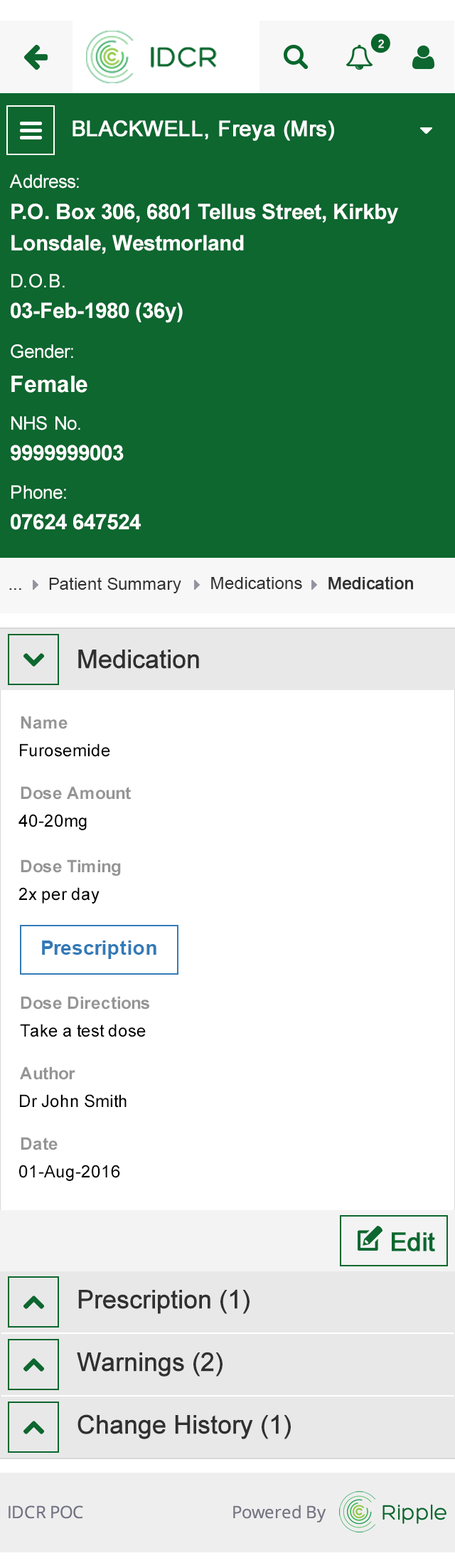
<style>
.page{position:relative;width:455px;height:1568px;background:#ffffff}
.page>*{position:absolute;margin:0}
.t1{font:21.3px/30.9px "Arial-BoldMT";color:#ffffff}
.t2{font:18.5px/30.9px "ArialMT";color:#ffffff}
.t3{font:22.8px/33.8px "Arial-BoldMT";color:#ffffff}
.t4{font:17.1px "ArialMT";color:#313131}
.t5{font:17.1px "ArialMT";color:#313131;font-weight:bold}
.t6{font:25.6px "ArialMT";color:#303030;font-weight:bold}
.t7{font:17.1px "Arial-BoldMT";color:#959595}
.t8{font:17.1px "ArialMT";color:#000000}
.t9{font:19.9px "Arial-BoldMT";color:#337ab7}
</style>
<div class="page">
<p class="t1" style="left:9px;top:174px;width:389px;height:80px"><span class="t2">Address: <br></span>P.O. Box 306, 6801 Tellus Street, Kirkby Lonsdale, Westmorland</p>
<p class="t1" style="left:11px;top:274px;width:172px;height:49px"><span class="t2">D.O.B. <br></span>03-Feb-1980 (36y)</p>
<p class="t2" style="left:11px;top:344px;width:77px;height:49px">Gender: <br><span class="t3">Female</span></p>
<p class="t1" style="left:11px;top:416px;width:113px;height:45px"><span class="t2">NHS No. <br></span>9999999003</p>
<p class="t1" style="left:11px;top:485px;width:130px;height:45px"><span class="t2">Phone: <br></span>07624 647524</p>
<p class="t4" style="left:49px;top:577px;width:132px;height:16px">Patient Summary</p>
<p class="t4" style="left:211px;top:576px;width:91px;height:13px">Medications</p>
<p class="t5" style="left:329px;top:576px;width:84px;height:14px">Medication</p>
<p class="t4" style="left:9px;top:588px;width:12px;height:2px">...</p>
<p class="t6" style="left:78px;top:650px;width:121px;height:19px">Medication</p>
<p class="t7" style="left:21px;top:716px;width:47px;height:13px">Name</p>
<p class="t8" style="left:20px;top:743px;width:90px;height:14px">Furosemide</p>
<p class="t7" style="left:21px;top:786px;width:110px;height:14px">Dose Amount</p>
<p class="t8" style="left:18px;top:814px;width:69px;height:16px">40-20mg</p>
<p class="t7" style="left:21px;top:859px;width:100px;height:17px">Dose Timing</p>
<p class="t8" style="left:18px;top:887px;width:82px;height:17px">2x per day</p>
<p class="t9" style="left:42px;top:941px;width:115px;height:18px">Prescription</p>
<p class="t7" style="left:21px;top:996px;width:128px;height:14px">Dose Directions</p>
<p class="t8" style="left:20px;top:1024px;width:126px;height:13px">Take a test dose</p>
<p class="t7" style="left:20px;top:1066px;width:55px;height:14px">Author</p>
<p class="t8" style="left:20px;top:1094px;width:107px;height:14px">Dr John Smith</p>
<p class="t7" style="left:21px;top:1137px;width:37px;height:13px">Date</p>
<p class="t8" style="left:19px;top:1165px;width:101px;height:16px">01-Aug-2016</p>
<p class="t6" style="left:78px;top:1289px;width:172px;height:25px">Prescription (1)</p>
<p class="t6" style="left:77px;top:1352px;width:146px;height:25px">Warnings (2)</p>
<p class="t6" style="left:78px;top:1414px;width:213px;height:25px">Change History (1)</p>
</div>
